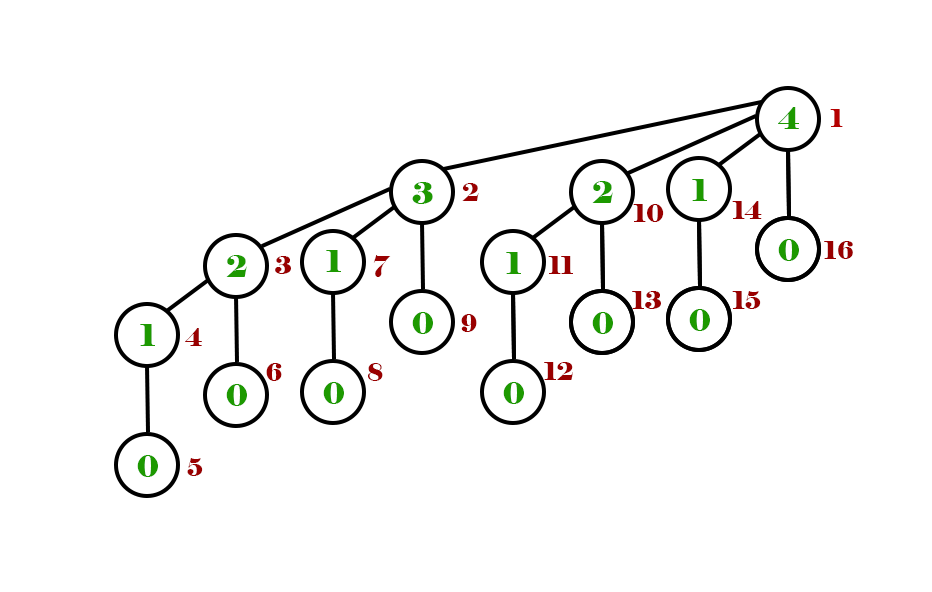
<style>
.page{position:relative;width:932px;height:592px;background:#ffffff}
.page>*{position:absolute;margin:0}
.t1{font:30px "Elephant-Regular";color:#1d9900}
.t2{font:24px "Elephant-Regular";color:#b50000}
.t3{font:24px "Elephant-Regular";color:#990000}
</style>
<div class="page">
<p class="t1" style="left:778px;top:107px;width:21px;height:22px">4</p>
<p class="t2" style="left:830px;top:109px;width:13px;height:18px">1</p>
<p class="t1" style="left:412px;top:182px;width:21px;height:22px">3</p>
<p class="t3" style="left:462px;top:183px;width:17px;height:18px">2</p>
<p class="t1" style="left:592px;top:181px;width:21px;height:22px">2</p>
<p class="t1" style="left:692px;top:179px;width:15px;height:22px">1</p>
<p class="t3" style="left:633px;top:204px;width:31px;height:18px">10</p>
<p class="t3" style="left:732px;top:201px;width:30px;height:18px">14</p>
<p class="t1" style="left:778px;top:239px;width:21px;height:22px">0</p>
<p class="t3" style="left:824px;top:241px;width:29px;height:18px">16</p>
<p class="t1" style="left:226px;top:255px;width:21px;height:22px">2</p>
<p class="t3" style="left:275px;top:256px;width:16px;height:18px">3</p>
<p class="t1" style="left:326px;top:250px;width:15px;height:22px">1</p>
<p class="t3" style="left:373px;top:255px;width:18px;height:22px">7</p>
<p class="t1" style="left:506px;top:252px;width:15px;height:22px">1</p>
<p class="t3" style="left:548px;top:256px;width:25px;height:18px">11</p>
<p class="t3" style="left:632px;top:291px;width:29px;height:18px">13</p>
<p class="t3" style="left:732px;top:291px;width:29px;height:18px">15</p>
<p class="t1" style="left:412px;top:312px;width:21px;height:22px">0</p>
<p class="t3" style="left:461px;top:314px;width:16px;height:18px">9</p>
<p class="t1" style="left:592px;top:312px;width:21px;height:22px">0</p>
<p class="t1" style="left:689px;top:309px;width:21px;height:22px">0</p>
<p class="t1" style="left:140px;top:324px;width:15px;height:22px">1</p>
<p class="t3" style="left:185px;top:328px;width:17px;height:18px">4</p>
<p class="t3" style="left:266px;top:363px;width:16px;height:18px">6</p>
<p class="t3" style="left:368px;top:363px;width:15px;height:18px">8</p>
<p class="t3" style="left:544px;top:362px;width:29px;height:18px">12</p>
<p class="t1" style="left:226px;top:384px;width:21px;height:22px">0</p>
<p class="t1" style="left:323px;top:382px;width:21px;height:22px">0</p>
<p class="t1" style="left:503px;top:382px;width:21px;height:22px">0</p>
<p class="t1" style="left:137px;top:455px;width:21px;height:22px">0</p>
<p class="t3" style="left:187px;top:458px;width:16px;height:18px">5</p>
</div>
